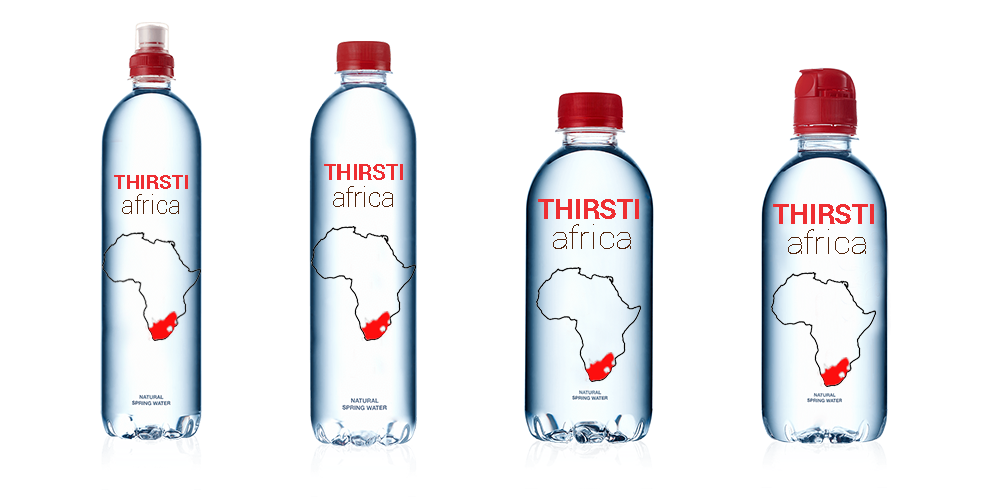
<style>
.page{position:relative;width:1000px;height:500px;background:#ffffff}
.page>*{position:absolute;margin:0}
.t1{font:21.5px "Roboto-Bold";color:#ee2e32}
.t2{font:20.3px "Roboto-Bold";color:#ee2e32}
.t3{font:25.4px "Roboto-Thin";color:#50240c}
.t4{font:26.9px "Roboto-Thin";color:#50240c}
.t5{font:27.5px "Roboto-Bold";color:#ee2e32}
.t6{font:31.8px "Roboto-Thin";color:#50240c;scale:1.1 1}
</style>
<div class="page">
<p class="t1" style="left:324px;top:164px;width:79px;height:16px">THIRSTI</p>
<p class="t2" style="left:114px;top:175px;width:74px;height:14px">THIRSTI</p>
<p class="t3" style="left:122px;top:194px;width:57px;height:20px">africa</p>
<p class="t4" style="left:333px;top:186px;width:60px;height:21px">africa</p>
<p class="t5" style="left:538px;top:199px;width:101px;height:20px">THIRSTI</p>
<p class="t5" style="left:773px;top:204px;width:101px;height:20px">THIRSTI</p>
<p class="t6" style="left:553px;top:224px;width:78px;height:25px">africa</p>
<p class="t6" style="left:788px;top:229px;width:78px;height:25px">africa</p>
</div>
